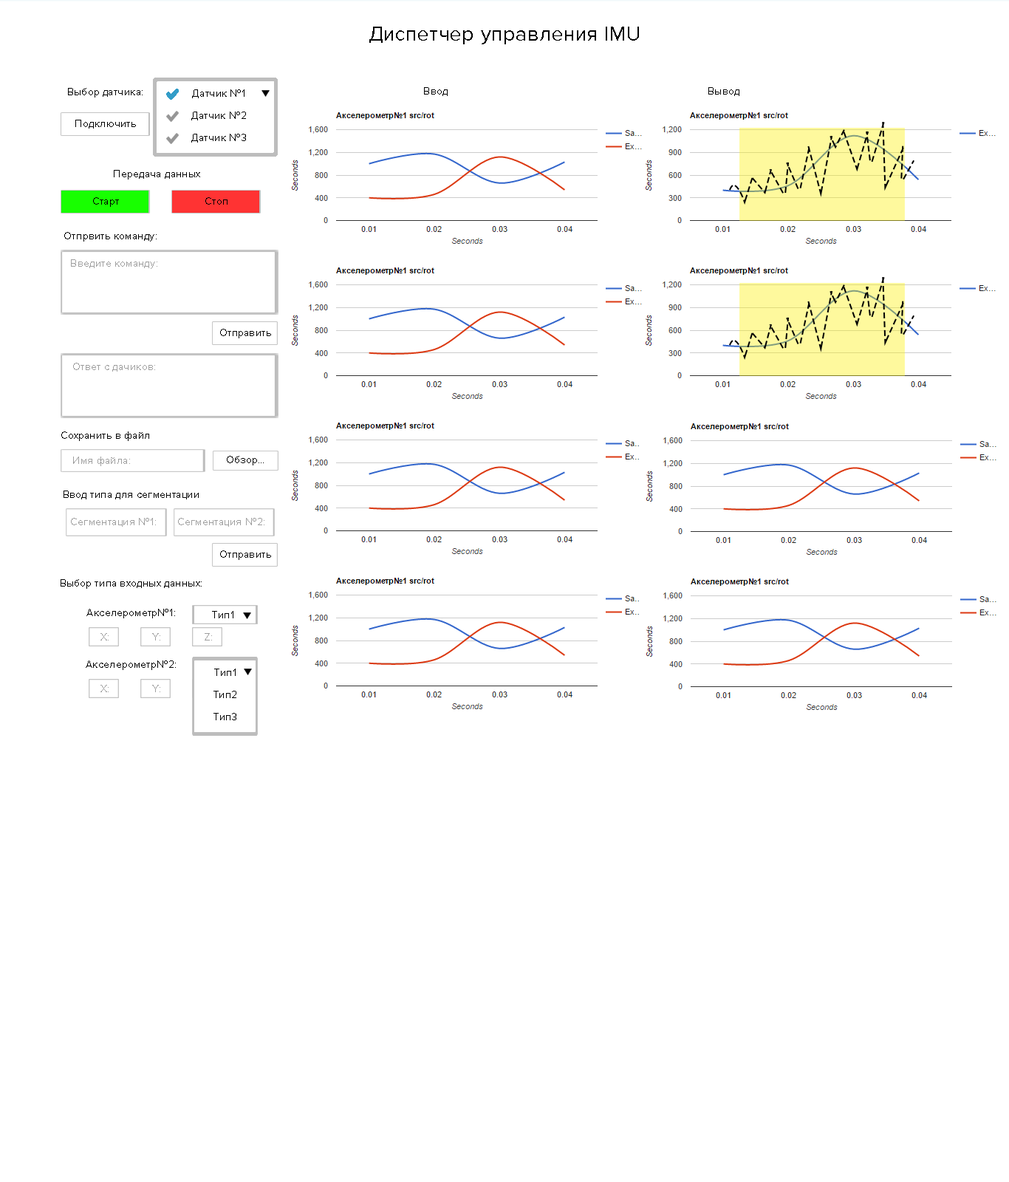
<style>
.page{position:relative;width:1009px;height:1182px;background:#ffffff}
.page>*{position:absolute;margin:0}
.t1{font:20.7px "ProximaNova-Regular";letter-spacing:0.03em;color:#000000}
.t2{font:10.3px "ProximaNova-Regular";letter-spacing:0.03em;color:#000000}
.t3{font:10.3px "ProximaNova-Regular";letter-spacing:0.03em;color:#9f9f9f}
</style>
<div class="page">
<p class="t1" style="left:369px;top:27px;width:270px;height:17px">Диспетчер управления IMU</p>
<p class="t2" style="left:68px;top:88px;width:75px;height:10px">Выбор датчика:</p>
<p class="t2" style="left:192px;top:89px;width:52px;height:9px">Датчик №1</p>
<p class="t2" style="left:424px;top:87px;width:24px;height:9px">Ввод</p>
<p class="t2" style="left:708px;top:87px;width:31px;height:9px">Вывод</p>
<p class="t2" style="left:191px;top:112px;width:55px;height:8px">Датчик №2</p>
<p class="t2" style="left:75px;top:120px;width:61px;height:9px">Подключить</p>
<p class="t2" style="left:191px;top:134px;width:55px;height:9px">Датчик №3</p>
<p class="t2" style="left:114px;top:170px;width:86px;height:9px">Передача данных</p>
<p class="t2" style="left:93px;top:197px;width:26px;height:10px">Старт</p>
<p class="t2" style="left:205px;top:197px;width:23px;height:8px">Стоп</p>
<p class="t2" style="left:64px;top:232px;width:93px;height:10px">Отпрвить команду:</p>
<p class="t3" style="left:71px;top:259px;width:86px;height:10px">Введите команду:</p>
<p class="t2" style="left:220px;top:329px;width:51px;height:9px">Отправить</p>
<p class="t3" style="left:73px;top:363px;width:82px;height:9px">Ответ с дачиков:</p>
<p class="t2" style="left:61px;top:431px;width:88px;height:10px">Сохранить в файл</p>
<p class="t3" style="left:73px;top:456px;width:57px;height:10px">Имя файла:</p>
<p class="t2" style="left:227px;top:456px;width:37px;height:9px">Обзор...</p>
<p class="t2" style="left:64px;top:490px;width:135px;height:9px">Ввод типа для сегментации</p>
<p class="t3" style="left:71px;top:518px;width:85px;height:9px">Сегментация №1:</p>
<p class="t3" style="left:178px;top:518px;width:86px;height:9px">Сегментация №2:</p>
<p class="t2" style="left:220px;top:550px;width:51px;height:10px">Отправить</p>
<p class="t2" style="left:61px;top:579px;width:141px;height:10px">Выбор типа входных данных:</p>
<p class="t2" style="left:86px;top:609px;width:89px;height:9px">Акселерометр№1:</p>
<p class="t2" style="left:212px;top:611px;width:21px;height:7px">Тип1</p>
<p class="t3" style="left:100px;top:633px;width:9px;height:7px">Х:</p>
<p class="t3" style="left:152px;top:633px;width:8px;height:7px">Y:</p>
<p class="t3" style="left:205px;top:633px;width:7px;height:7px">Z:</p>
<p class="t2" style="left:86px;top:660px;width:90px;height:10px">Акселерометр№2:</p>
<p class="t2" style="left:214px;top:668px;width:22px;height:8px">Тип1</p>
<p class="t3" style="left:100px;top:685px;width:9px;height:7px">Х:</p>
<p class="t3" style="left:152px;top:685px;width:8px;height:7px">Y:</p>
<p class="t2" style="left:213px;top:691px;width:23px;height:7px">Тип2</p>
<p class="t2" style="left:213px;top:713px;width:23px;height:7px">Тип3</p>
</div>
